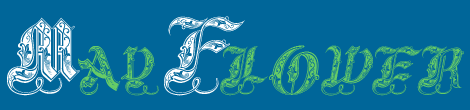
<style>
.page{position:relative;width:470px;height:110px;background:#006699}
.page>*{position:absolute;margin:0}
.t1{font:100px "RoyalInitialen";color:#ffffff}
.t2{font:100px "RoyalInitialen";color:#ffffff;font-style:italic}
.t3{font:62px "RoyalInitialen";color:#66cc66}
.t4{font:62px "RoyalInitialen";color:#66cc66;font-style:italic}
</style>
<div class="page">
<p class="t1" style="left:7px;top:17px;width:73px;height:79px">M</p>
<p class="t2" style="left:164px;top:16px;width:81px;height:80px">F</p>
<p class="t3" style="left:78px;top:46px;width:81px;height:50px">AY</p>
<p class="t4" style="left:220px;top:45px;width:244px;height:51px">LOWER</p>
</div>
